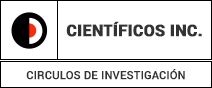
<style>
.page{position:relative;width:212px;height:88px;background:#ffffff}
.page>*{position:absolute;margin:0}
.t1{font:16px "Roboto-Black";color:#333333;text-transform:uppercase;font-weight:bold}
.t2{font:11px "Roboto-Medium";color:#333333;text-transform:uppercase;font-weight:bold}
</style>
<div class="page">
<p class="t1" style="left:66px;top:21px;width:136px;height:16px">Científicos inc.</p>
<p class="t2" style="left:26px;top:69px;width:159px;height:11px">CIRCULOS DE INVESTIGACIÓN</p>
</div>
